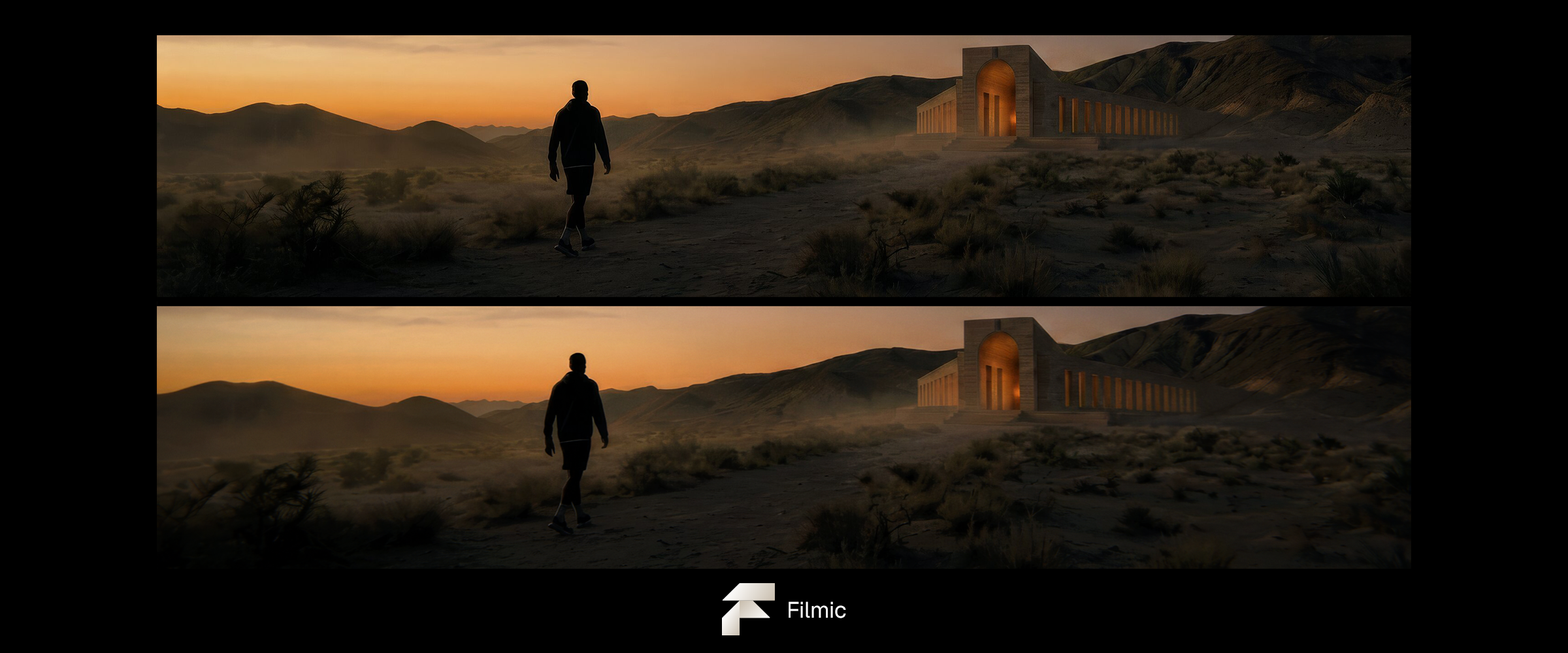
<style>
.page{position:relative;width:1568px;height:653px;background:#000000}
.page>*{position:absolute;margin:0}
.t1{font:22.2px "Geist-Regular";color:#ffffff}
</style>
<div class="page">
<p class="t1" style="left:789px;top:602px;width:57px;height:17px">Filmic</p>
</div>
